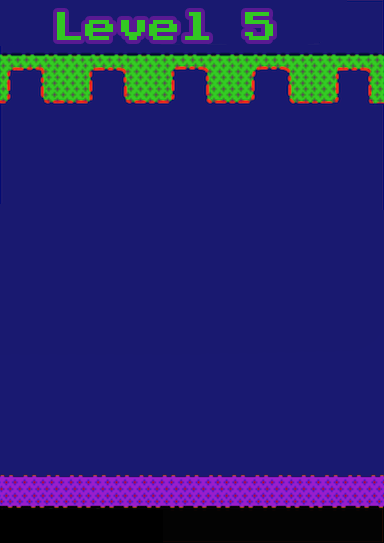
<style>
.page{position:relative;width:384px;height:543px;background:#191970}
.page>*{position:absolute;margin:0}
.t1{font:32px "PressStart2P-Regular";color:#32c722}
</style>
<div class="page">
<p class="t1" style="left:57px;top:12px;width:216px;height:28px">Level 5</p>
</div>
